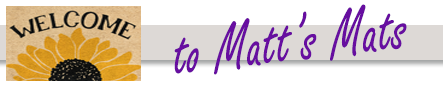
<style>
.page{position:relative;width:443px;height:86px;background:#ffffff}
.page>*{position:absolute;margin:0}
.t1{font:72px "FreestyleScript-Regular";color:#670ea0;scale:0.8 1}
</style>
<div class="page">
<p class="t1" style="left:174px;top:4px;width:233px;height:71px;rotate:-7deg">to Matt’s Mats</p>
</div>
